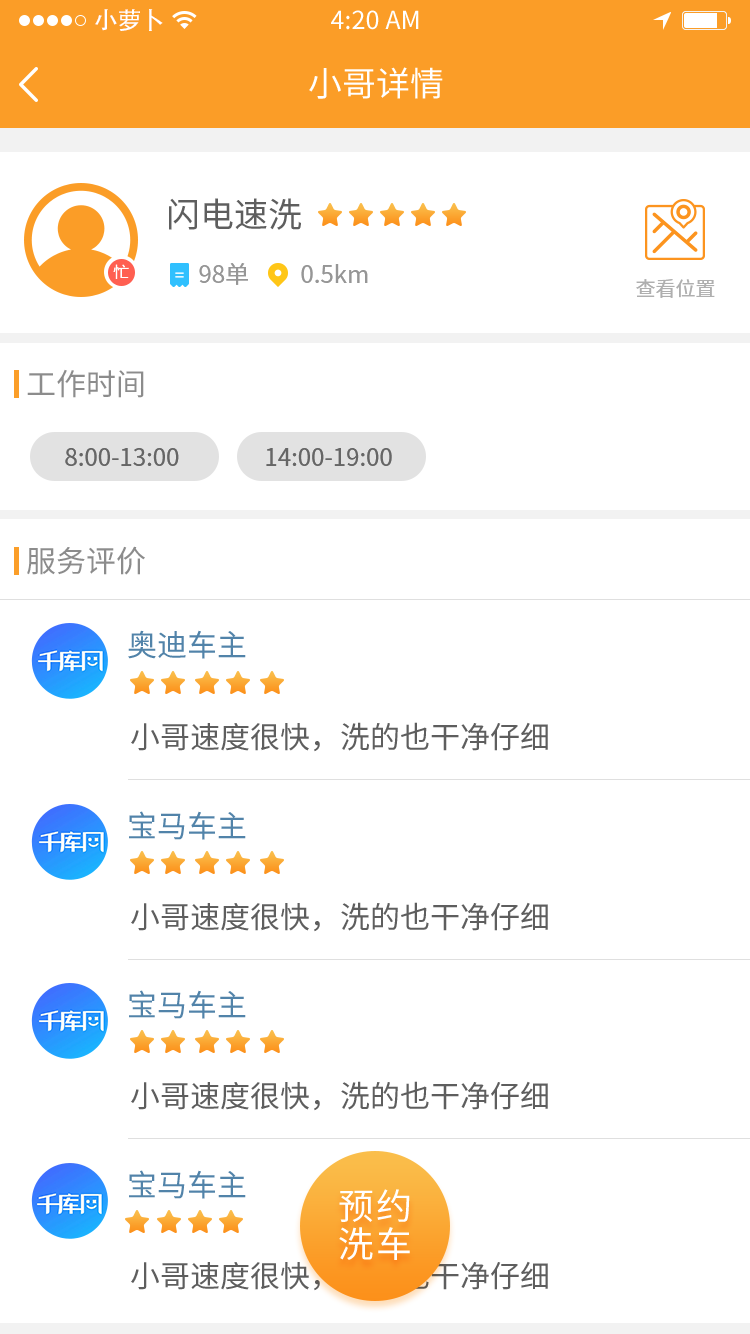
<style>
.page{position:relative;width:750px;height:1334px;background:#ffffff}
.page>*{position:absolute;margin:0}
.t1{font:24px "AdobeHeitiStd-Regular";color:#ffffff}
.t2{font:25px "SourceHanSansCN-Regular";color:#ffffff}
.t3{font:34px "SourceHanSansCN-Regular";color:#ffffff}
.t4{font:34px "SourceHanSansCN-Regular";color:#5e5e5e}
.t5{font:16px "SourceHanSansCN-Regular";letter-spacing:0.06em;color:#ffffff}
.t6{font:24px "SourceHanSansCN-Regular";color:#969696}
.t7{font:20px "SourceHanSansCN-Regular";color:#afafaf}
.t8{font:30px "SourceHanSansCN-Regular";color:#8c8c8c}
.t9{font:24px "SourceHanSansCN-Regular";color:#666666}
.t10{font:30px "SourceHanSansCN-Regular";color:#5183a9}
.t11{font:30px "SourceHanSansCN-Regular";color:#5e5e5e}
.t12{font:36px/38px "SourceHanSansCN-Regular";letter-spacing:0.06em;color:#ffffff}
</style>
<div class="page">
<p class="t1" style="left:95px;top:9px;width:68px;height:22px">小萝卜</p>
<p class="t2" style="left:331px;top:10px;width:88px;height:20px">4:20 AM</p>
<p class="t3" style="left:309px;top:67px;width:134px;height:32px">小哥详情</p>
<p class="t4" style="left:169px;top:198px;width:132px;height:32px">闪电速洗</p>
<p class="t5" style="left:113px;top:264px;width:16px;height:15px">忙</p>
<p class="t6" style="left:199px;top:263px;width:49px;height:22px">98单</p>
<p class="t6" style="left:301px;top:264px;width:67px;height:19px">0.5km</p>
<p class="t7" style="left:636px;top:279px;width:79px;height:19px">查看位置</p>
<p class="t8" style="left:27px;top:369px;width:117px;height:29px">工作时间</p>
<p class="t9" style="left:65px;top:448px;width:114px;height:18px">8:00-13:00</p>
<p class="t9" style="left:266px;top:448px;width:126px;height:18px">14:00-19:00</p>
<p class="t8" style="left:27px;top:546px;width:118px;height:29px">服务评价</p>
<p class="t10" style="left:128px;top:630px;width:118px;height:29px">奥迪车主</p>
<p class="t11" style="left:131px;top:722px;width:417px;height:30px">小哥速度很快，洗的也干净仔细</p>
<p class="t10" style="left:129px;top:811px;width:117px;height:29px">宝马车主</p>
<p class="t11" style="left:131px;top:902px;width:417px;height:30px">小哥速度很快，洗的也干净仔细</p>
<p class="t10" style="left:129px;top:990px;width:117px;height:29px">宝马车主</p>
<p class="t11" style="left:131px;top:1081px;width:417px;height:30px">小哥速度很快，洗的也干净仔细</p>
<p class="t10" style="left:129px;top:1170px;width:117px;height:29px">宝马车主</p>
<p class="t12" style="left:339px;top:1189px;width:71px;height:71px">预约<br>洗车</p>
<p class="t11" style="left:131px;top:1261px;width:417px;height:30px">小哥速度很快，洗的也干净仔细</p>
</div>
